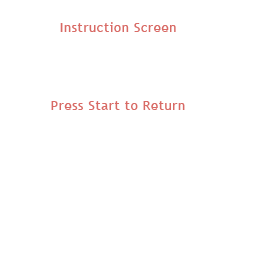
<style>
.page{position:relative;width:256px;height:256px;background:#ffffff}
.page>*{position:absolute;margin:0}
.t1{font:13px "TrebuchetMS";letter-spacing:0.05em;color:#d86a65}
</style>
<div class="page">
<p class="t1" style="left:60px;top:22px;width:116px;height:10px">Instruction Screen</p>
<p class="t1" style="left:51px;top:101px;width:134px;height:9px">Press Start to Return</p>
</div>
